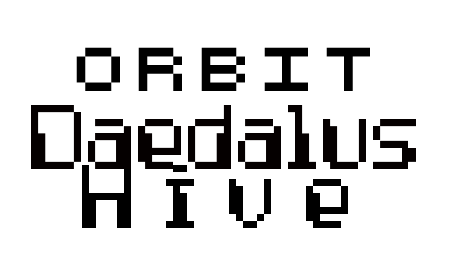
<style>
.page{position:relative;width:455px;height:256px;background:#ffffff}
.page>*{position:absolute;margin:0}
.t1{font:60px "RetroComputer";letter-spacing:0.2em;color:#000000}
.t2{font:140px "ComputerPixel-7";letter-spacing:0.2em;color:#000000}
</style>
<div class="page">
<p class="t1" style="left:76px;top:47px;width:294px;height:44px">Orbit</p>
<p class="t2" style="left:82px;top:165px;width:266px;height:63px">Hive</p>
</div>
